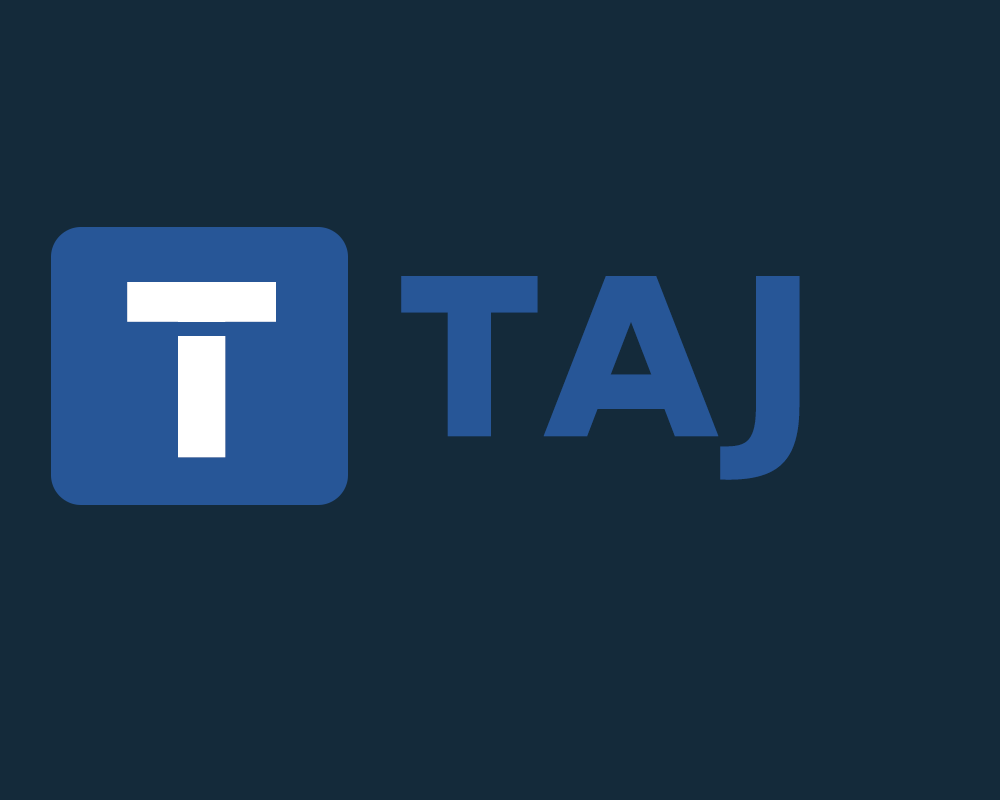
<style>
.page{position:relative;width:1000px;height:800px;background:#142a3a}
.page>*{position:absolute;margin:0}
.t1{font:266.7px "TarzanaWideOT-Bold";letter-spacing:0.05em;color:#275697}
.t2{font:291.7px "TarzanaWideOT-Bold";letter-spacing:0.025em;color:#ffffff}
</style>
<div class="page">
<p class="t1" style="left:401px;top:276px;width:399px;height:204px">TAJ</p>
<p class="t2" style="left:127px;top:282px;width:149px;height:176px">T</p>
</div>
